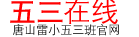
<style>
.page{position:relative;width:139px;height:37px;background:#ffffff}
.page>*{position:absolute;margin:0}
.t1{font:28px "DengXian-Bold";color:#ff0000}
.t2{font:12px "DengXian"}
</style>
<div class="page">
<p class="t1" style="left:10px;top:1px;width:53px;height:22px">五三</p>
<p class="t2" style="left:13px;top:24px;width:106px;height:12px">唐山雷小五三班官网</p>
</div>
